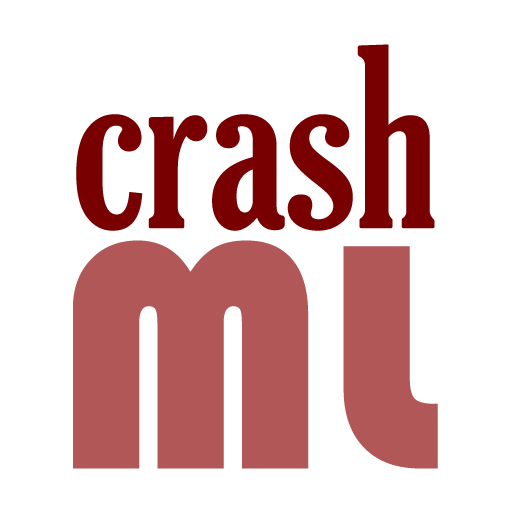
<style>
.page{position:relative;width:512px;height:512px;background:#ffffff}
.page>*{position:absolute;margin:0}
.t1{font:241.7px "GloucesterMT-ExtraCondensed";color:#780000}
.t2{font:333.3px "Bauhaus93";color:#b15757}
</style>
<div class="page">
<p class="t1" style="left:76px;top:44px;width:359px;height:187px">crash</p>
<p class="t2" style="left:73px;top:240px;width:365px;height:229px">ML</p>
</div>
